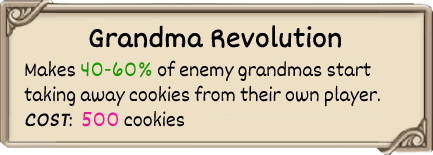
<style>
.page{position:relative;width:433px;height:155px;background:#ede0c4}
.page>*{position:absolute;margin:0}
.t1{font:30px "Dekko";color:#000000;font-weight:bold}
.t2{font:21px "Dekko";color:#000000}
.t3{font:21px "Dekko";color:#1b9902}
.t4{font:21px "Dekko";color:#000000;font-weight:bold;font-style:italic}
.t5{font:21px "Dekko";color:#f0129a}
</style>
<div class="page">
<p class="t1" style="left:89px;top:25px;width:253px;height:23px">Grandma Revolution</p>
<p class="t2" style="left:24px;top:60px;width:356px;height:67px">Makes <span class="t3">40-60% </span>of enemy grandmas start<br>taking away cookies from their own player. <br><span class="t4">COST</span>:  <span class="t5">500 </span>cookies</p>
</div>
